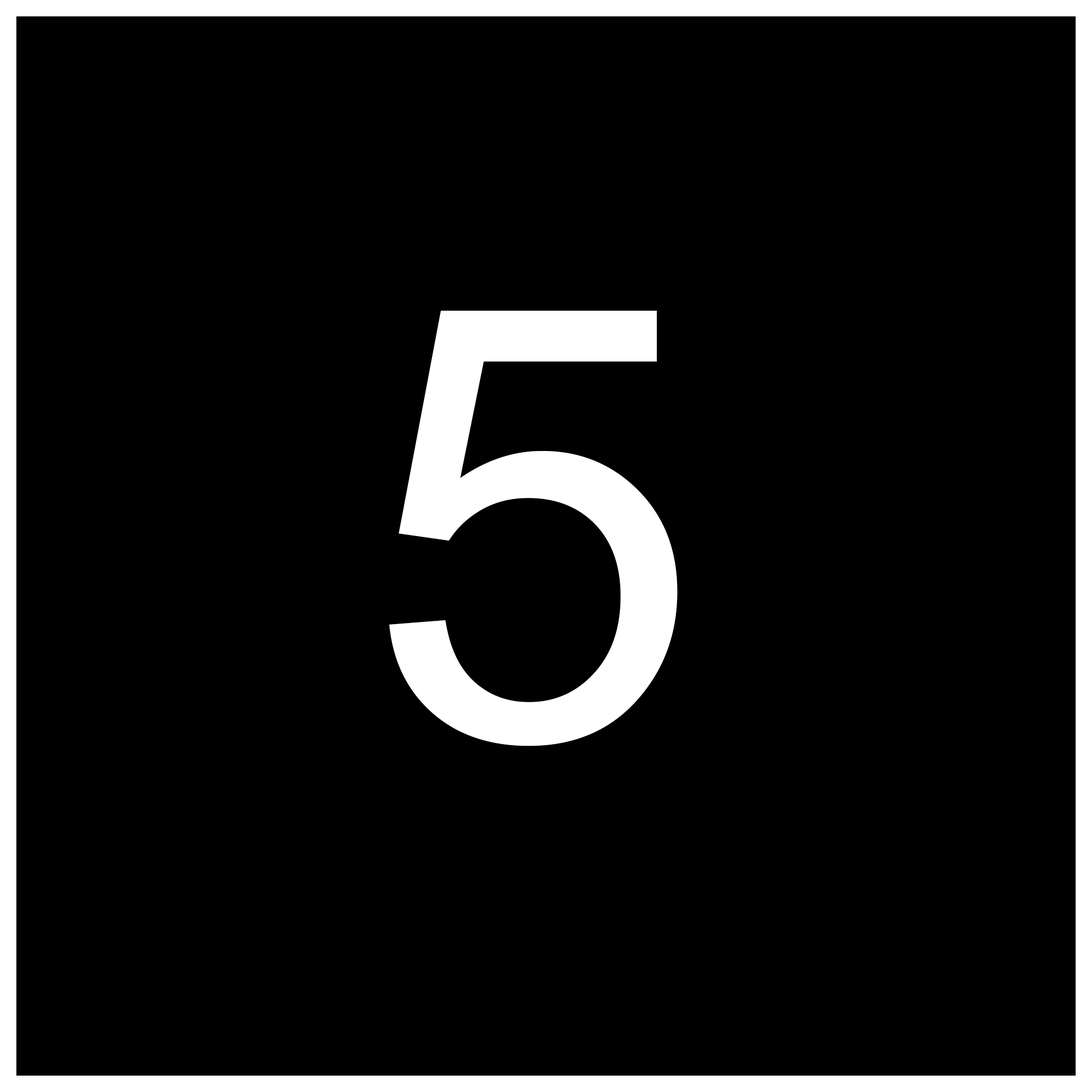
<style>
.page{position:relative;width:1092px;height:1092px;background:#000000}
.page>*{position:absolute;margin:0}
.t1{font:606.7px "ArialMT";color:#ffffff}
</style>
<div class="page">
<p class="t1" style="left:389px;top:311px;width:289px;height:435px">5</p>
</div>
